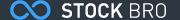
<style>
.page{position:relative;width:180px;height:20px;background:#2c3742}
.page>*{position:absolute;margin:0}
.t1{font:20px "DINPro-Medium";color:#ffffff}
.t2{font:20px "DINPro-Light";color:#ffffff}
</style>
<div class="page">
<p class="t1" style="left:61px;top:3px;width:105px;height:15px">STOCK <span class="t2">BRO</span></p>
</div>
